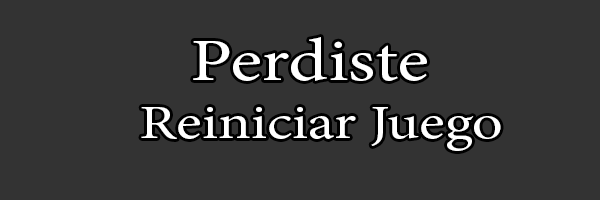
<style>
.page{position:relative;width:600px;height:200px;background:#333333}
.page>*{position:absolute;margin:0}
.t1{font:48px "MinionPro-Regular";color:#ffffff;scale:1.25 1}
.t2{font:60px "MinionPro-Regular";color:#ffffff;scale:1.25 1}
</style>
<div class="page">
<p class="t1" style="left:141px;top:37px;width:360px;height:114px"><span class="t2">   Perdiste<br></span>Reiniciar Juego</p>
</div>
